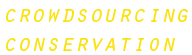
<style>
.page{position:relative;width:192px;height:55px;background:#ffffff}
.page>*{position:absolute;margin:0}
.t1{font:24px "OratorStd-Slanted";color:#fbe20f}
</style>
<div class="page">
<p class="t1" style="left:6px;top:9px;width:182px;height:42px;text-align:justify">crowdsourcing<br>conservation</p>
</div>
